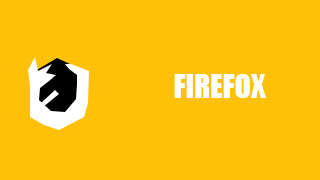
<style>
.page{position:relative;width:320px;height:180px;background:#ffc107}
.page>*{position:absolute;margin:0}
.t1{font:30px "Impact";color:#ffffff}
</style>
<div class="page">
<p class="t1" style="left:174px;top:74px;width:92px;height:24px">FIREFOX</p>
</div>
